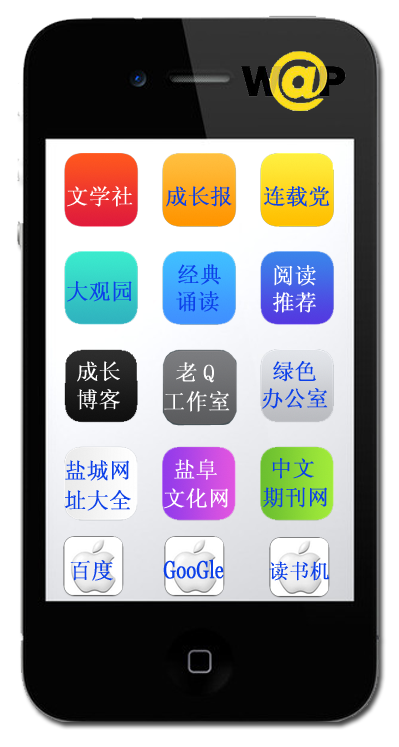
<style>
.page{position:relative;width:399px;height:747px;background:#ffffff}
.page>*{position:absolute;margin:0}
.t1{font:22px "SimSun";color:#ffffff;font-weight:bold}
.t2{font:22px "SimSun";color:#0c40e9;font-weight:bold}
.t3{font:24px "Georgia";color:#0c40e9;font-weight:bold;scale:0.73 1}
.t4{font:20px "SimSun";color:#0c40e9;font-weight:bold}
</style>
<div class="page">
<p class="t1" style="left:67px;top:186px;width:66px;height:21px">文学社</p>
<p class="t2" style="left:166px;top:186px;width:66px;height:21px">成长报</p>
<p class="t2" style="left:264px;top:186px;width:66px;height:21px">连载党</p>
<p class="t2" style="left:178px;top:264px;width:43px;height:21px">经典</p>
<p class="t1" style="left:274px;top:265px;width:42px;height:21px">阅读</p>
<p class="t2" style="left:67px;top:281px;width:65px;height:21px">大观园</p>
<p class="t2" style="left:176px;top:291px;width:43px;height:21px">诵读</p>
<p class="t1" style="left:273px;top:292px;width:43px;height:21px">推荐</p>
<p class="t1" style="left:77px;top:361px;width:43px;height:21px">成长</p>
<p class="t1" style="left:176px;top:362px;width:38px;height:21px">老Q</p>
<p class="t2" style="left:273px;top:361px;width:43px;height:21px">绿色</p>
<p class="t1" style="left:77px;top:389px;width:43px;height:21px">博客</p>
<p class="t2" style="left:262px;top:388px;width:66px;height:21px">办公室</p>
<p class="t1" style="left:164px;top:391px;width:66px;height:21px">工作室</p>
<p class="t2" style="left:65px;top:460px;width:64px;height:21px">盐城网</p>
<p class="t1" style="left:174px;top:459px;width:43px;height:21px">盐阜</p>
<p class="t2" style="left:272px;top:458px;width:42px;height:21px">中文</p>
<p class="t2" style="left:65px;top:490px;width:66px;height:21px">址大全</p>
<p class="t1" style="left:164px;top:488px;width:64px;height:21px">文化网</p>
<p class="t2" style="left:263px;top:487px;width:64px;height:21px">期刊网</p>
<p class="t2" style="left:70px;top:560px;width:43px;height:21px">百度</p>
<p class="t3" style="left:163px;top:559px;width:61px;height:20px">GooGle</p>
<p class="t4" style="left:269px;top:561px;width:61px;height:20px">读书机</p>
</div>
